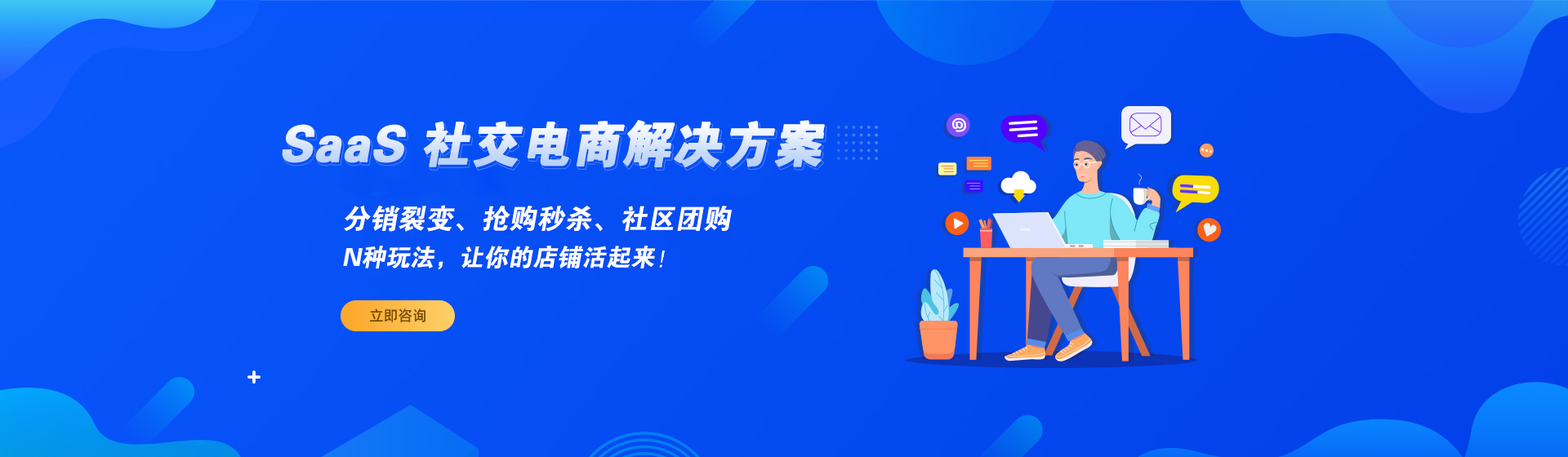
<style>
.page{position:relative;width:1568px;height:457px}
.page>*{position:absolute;margin:0}
.t1{font:49px "FZDHTJW--GB1-0";font-weight:bold;font-style:italic}
.t2{font:27.8px "FZDHTJW--GB1-0";color:#ffffff;font-style:italic}
.t3{font:24.5px "FZDHTJW--GB1-0";color:#ffffff;font-style:italic}
</style>
<div class="page">
<p class="t1" style="left:282px;top:120px;width:543px;height:48px">SaaS 社交电商解决方案</p>
<p class="t1" style="left:283px;top:122px;width:543px;height:49px">SaaS 社交电商解决方案</p>
<p class="t2" style="left:344px;top:205px;width:388px;height:27px">分销裂变、抢购秒杀、社区团购</p>
<p class="t3" style="left:343px;top:246px;width:322px;height:24px">N种玩法，让你的店铺活起来！</p>
</div>
